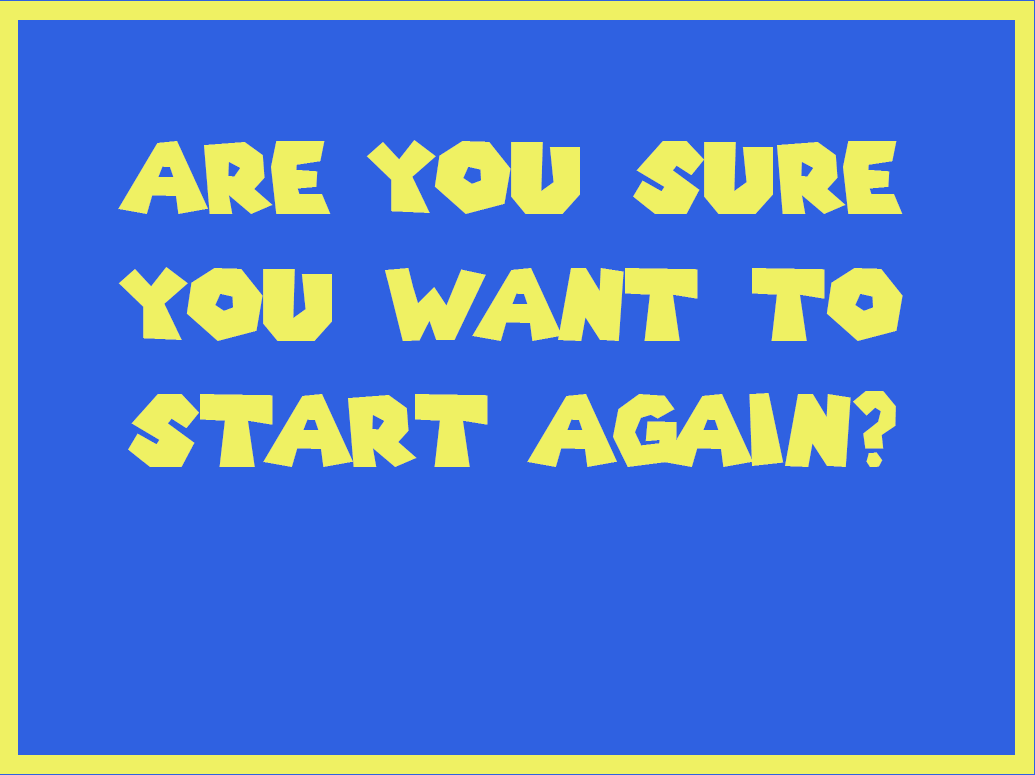
<style>
.page{position:relative;width:1035px;height:775px;background:#2f61e1}
.page>*{position:absolute;margin:0}
.t1{font:98.4px/126.7px "SuperMarioGalaxy";color:#eff163}
</style>
<div class="page">
<p class="t1" style="left:118px;top:140px;width:785px;height:327px;text-align:center">Are you sure<br>you want to<br>start again?</p>
</div>
